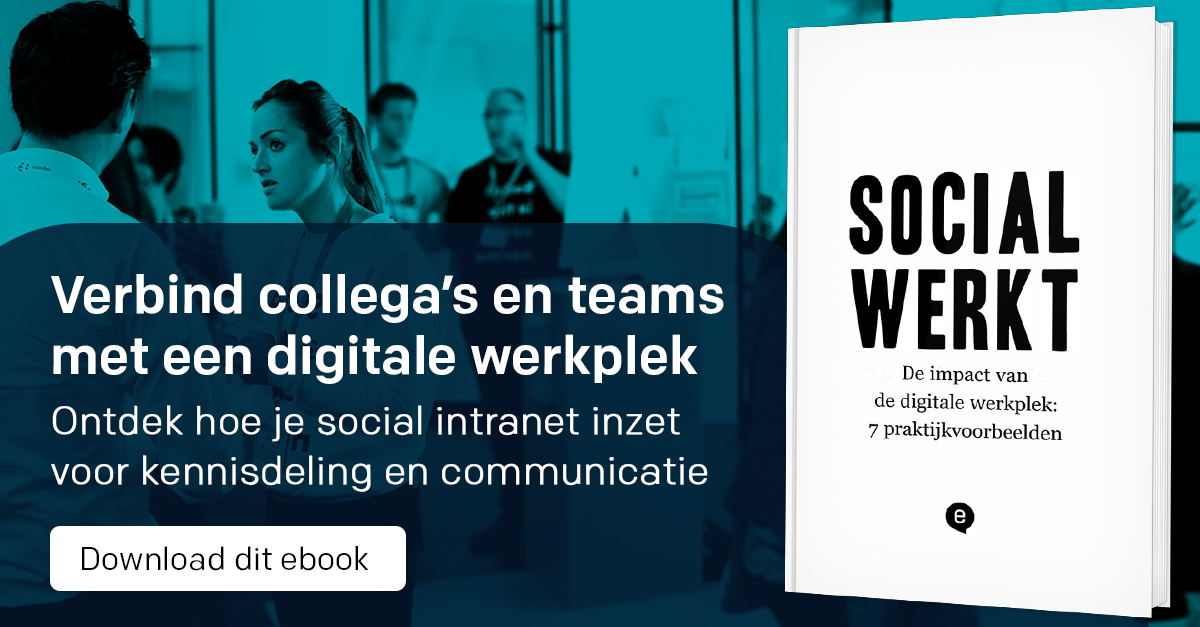
<style>
.page{position:relative;width:1200px;height:627px}
.page>*{position:absolute;margin:0}
.t1{font:53.3px/61.3px "Chrono-Medium";color:#ffffff}
.t2{font:38.7px/49.3px "Chrono-Light";color:#ffffff;font-weight:bold}
.t3{font:32px "Chrono-Regular";color:#000000}
</style>
<div class="page">
<p class="t1" style="left:51px;top:273px;width:673px;height:111px">Verbind collega’s en teams<br>met een digitale werkplek</p>
<p class="t1" style="left:51px;top:273px;width:673px;height:111px">Verbind collega’s en teams<br>met een digitale werkplek</p>
<p class="t2" style="left:51px;top:405px;width:657px;height:87px">Ontdek hoe je social intranet inzet <br>voor kennisdeling en communicatie</p>
<p class="t2" style="left:51px;top:405px;width:657px;height:87px">Ontdek hoe je social intranet inzet <br>voor kennisdeling en communicatie</p>
<p class="t3" style="left:82px;top:546px;width:287px;height:25px">Download dit ebook</p>
<p class="t3" style="left:82px;top:546px;width:287px;height:25px">Download dit ebook</p>
</div>
